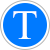
<style>
.page{position:relative;width:50px;height:50px;background:#007aff}
.page>*{position:absolute;margin:0}
.t1{font:41.7px "TimesNewRomanPSMT";letter-spacing:-0.01em;color:#ffffff}
</style>
<div class="page">
<p class="t1" style="left:13px;top:11px;width:24px;height:28px">T</p>
</div>
